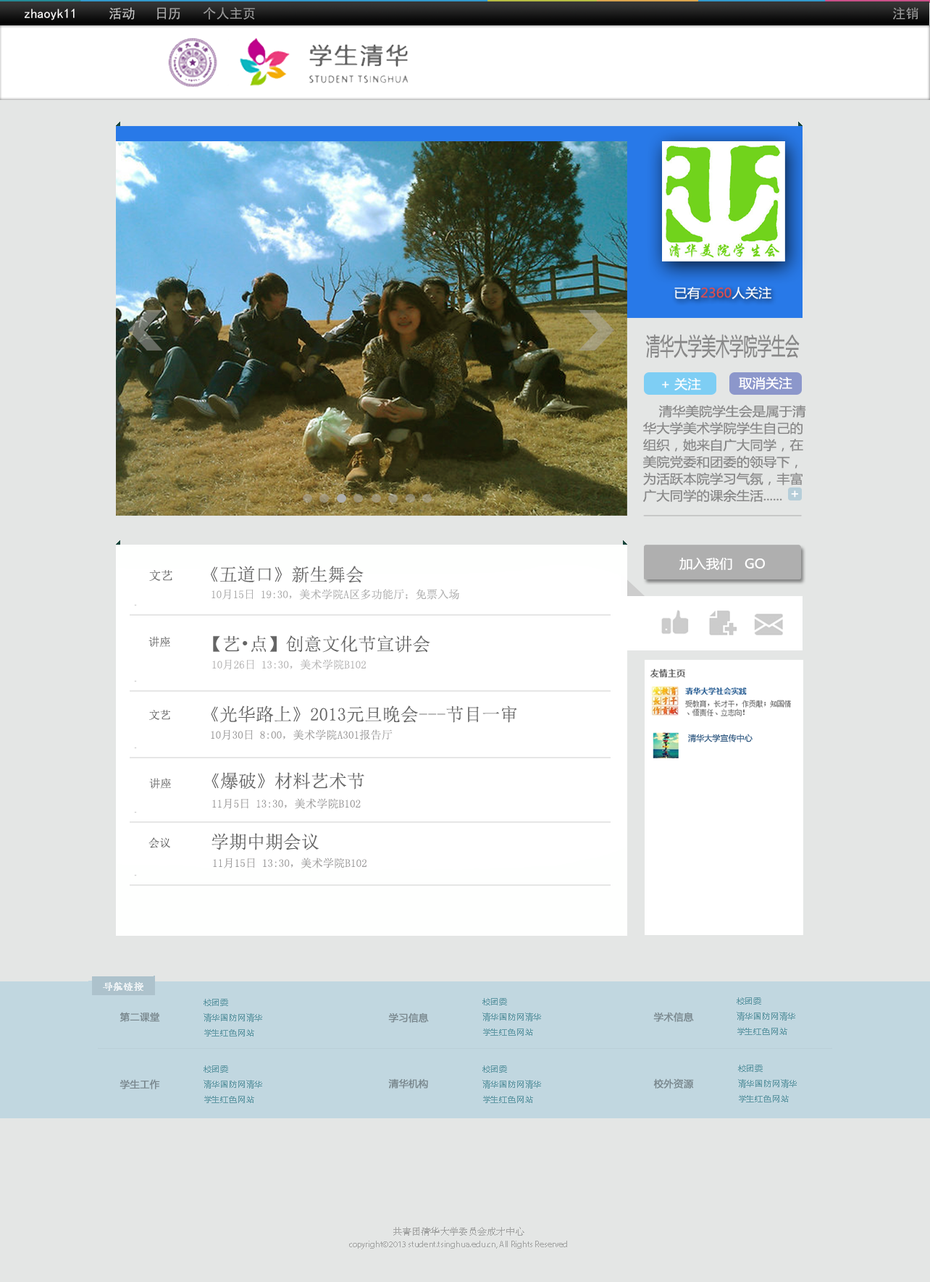
<style>
.page{position:relative;width:930px;height:1282px;background:#e4e6e5}
.page>*{position:absolute;margin:0}
.t1{font:24.1px "MicrosoftYaHei";color:#888888;scale:0.58 1}
.t2{font:12.7px "MicrosoftYaHei";color:#ffffff;scale:1.05 1}
.t3{font:12.7px/16.9px "MicrosoftYaHei";color:#888888;scale:1.05 1}
.t4{font:18.1px "SimSun";color:#676767}
.t5{font:12.1px "SimSun";color:#676767}
.t6{font:11.1px "SimSun";color:#acacac}
.t7{font:11.1px "SimSun";color:#656565}
.t8{font:18.1px "SimSun";color:#656565}
.t9{font:11.1px "SimSun";color:#b6b5b5}
.t10{font:11.1px "SimSun";color:#9e9d9d}
</style>
<div class="page">
<p class="t1" style="left:646px;top:334px;width:154px;height:25px">清华大学美术学院学生会</p>
<p class="t2" style="left:739px;top:377px;width:53px;height:13px">取消关注</p>
<p class="t3" style="left:642px;top:405px;width:164px;height:97px">清华美院学生会是属于清<br>华大学美术学院学生自己的<br>组织，她来自广大同学，在<br>美院党委和团委的领导下，<br>为活跃本院学习气氛，丰富<br>广大同学的课余生活......</p>
<p class="t2" style="left:791px;top:490px;width:7px;height:8px">+</p>
<p class="t2" style="left:679px;top:558px;width:86px;height:12px">加入我们   GO</p>
<p class="t4" style="left:211px;top:566px;width:153px;height:17px">《五道口》新生舞会</p>
<p class="t5" style="left:149px;top:570px;width:23px;height:11px">文艺</p>
<p class="t6" style="left:212px;top:589px;width:247px;height:11px">10月15日 19:30，美术学院A区多功能厅；免票入场</p>
<p class="t7" style="left:148px;top:637px;width:22px;height:11px">讲座</p>
<p class="t8" style="left:213px;top:635px;width:217px;height:18px">【艺•点】创意文化节宣讲会</p>
<p class="t9" style="left:212px;top:659px;width:154px;height:11px">10月26日 13:30，美术学院B102</p>
<p class="t7" style="left:149px;top:710px;width:22px;height:10px">文艺</p>
<p class="t8" style="left:211px;top:706px;width:306px;height:17px">《光华路上》2013元旦晚会---节目一审</p>
<p class="t10" style="left:211px;top:729px;width:182px;height:11px">10月30日 8:00，美术学院A301报告厅</p>
<p class="t8" style="left:212px;top:772px;width:152px;height:18px">《爆破》材料艺术节</p>
<p class="t7" style="left:149px;top:778px;width:22px;height:11px">讲座</p>
<p class="t10" style="left:212px;top:798px;width:149px;height:11px">11月5日 13:30，美术学院B102</p>
<p class="t8" style="left:212px;top:833px;width:107px;height:17px">学期中期会议</p>
<p class="t7" style="left:148px;top:837px;width:22px;height:11px">会议</p>
<p class="t10" style="left:213px;top:858px;width:154px;height:10px">11月15日 13:30，美术学院B102</p>
</div>
